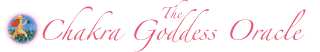
<style>
.page{position:relative;width:320px;height:52px;background:#ffffff}
.page>*{position:absolute;margin:0}
.t1{font:18px "Zapfino";color:#e85877}
.t2{font:10px "Zapfino";color:#e85877}
</style>
<div class="page">
<p class="t1" style="left:42px;top:0px;width:264px;height:52px"><span class="t2">The <br></span>  Chakra Goddess Oracle</p>
</div>
